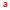
<style>
.page{position:relative;width:10px;height:10px;background:#ffffff}
.page>*{position:absolute;margin:0}
.t1{font:10.2px "Carlito";color:#ff0000}
</style>
<div class="page">
<p class="t1" style="left:3px;top:2px;width:5px;height:5px">a</p>
</div>
